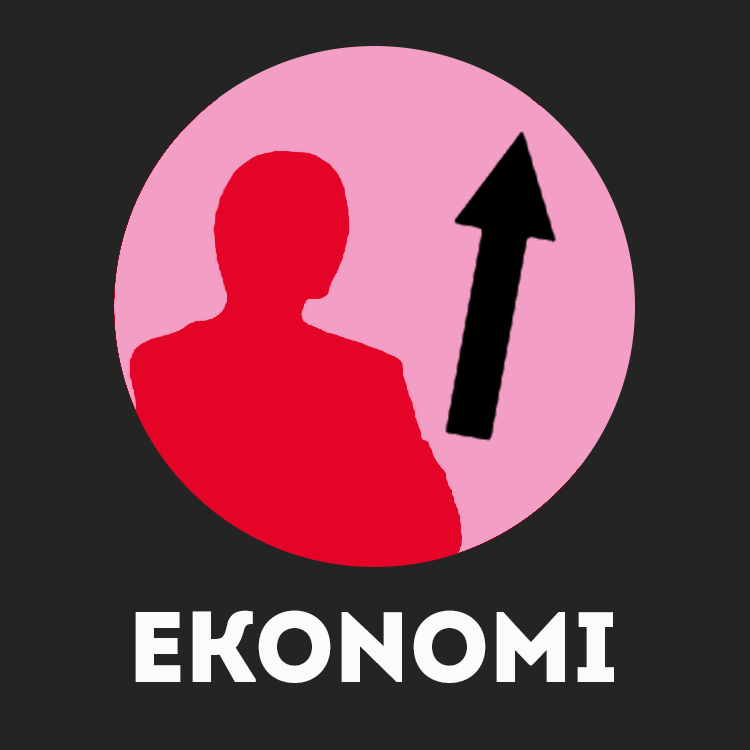
<style>
.page{position:relative;width:750px;height:750px;background:#242424}
.page>*{position:absolute;margin:0}
.t1{font:100px "Intro-Black";color:#fbfbfb}
</style>
<div class="page">
<p class="t1" style="left:135px;top:610px;width:479px;height:73px">EKONOMI</p>
</div>
